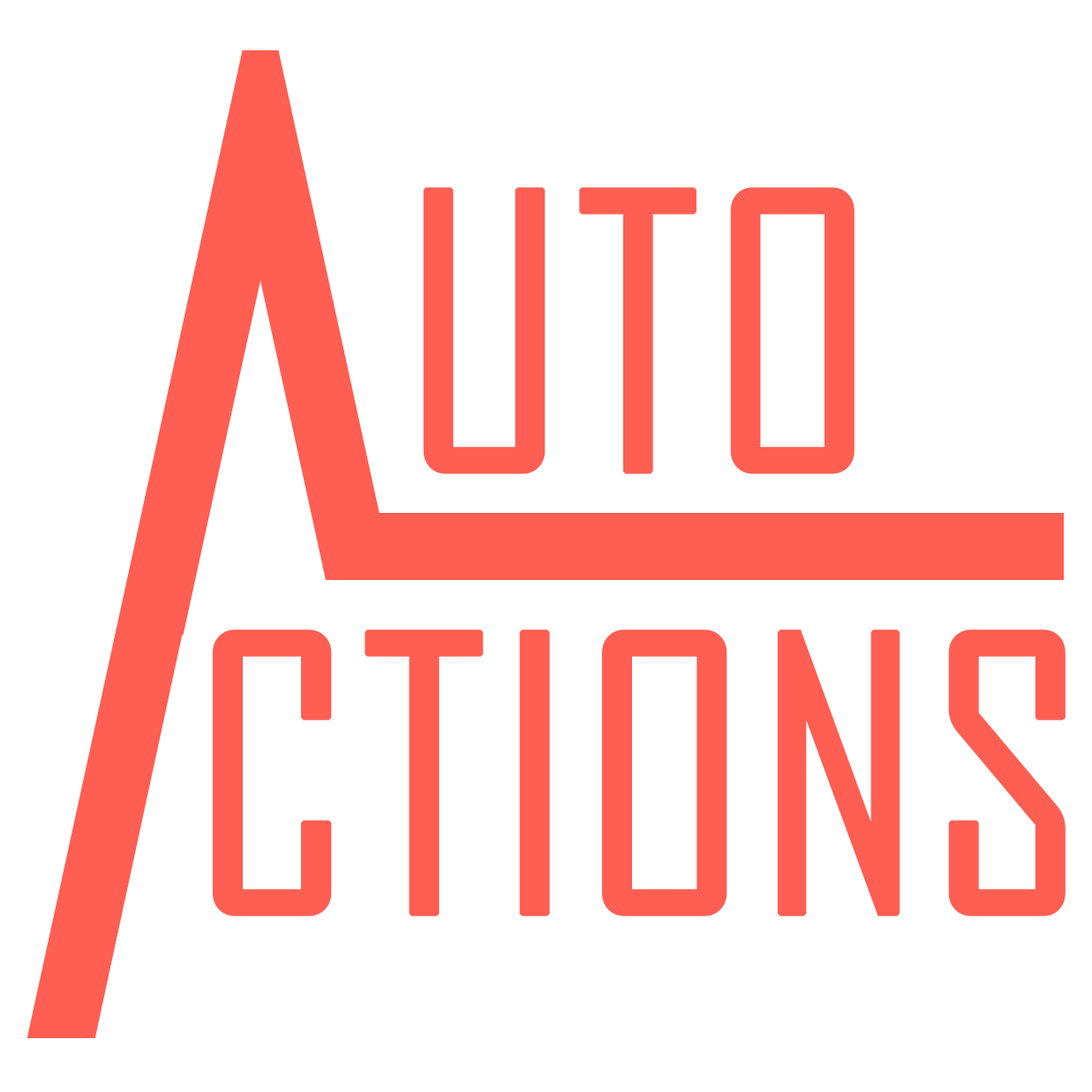
<style>
.page{position:relative;width:1092px;height:1092px;background:#ffffff}
.page>*{position:absolute;margin:0}
.t1{font:367.8px "AgencyFB-Reg";color:#ff5e52;text-transform:uppercase;font-weight:bold}
</style>
<div class="page">
<p class="t1" style="left:423px;top:187px;width:432px;height:287px">uto</p>
<p class="t1" style="left:212px;top:629px;width:854px;height:287px">ctions</p>
</div>
